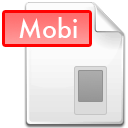
<style>
.page{position:relative;width:128px;height:128px;background:#ffffff}
.page>*{position:absolute;margin:0}
.t1{font:25px "Futura-Medium";color:#ffffff}
</style>
<div class="page">
<p class="t1" style="left:19px;top:17px;width:58px;height:21px">Mobi</p>
</div>
